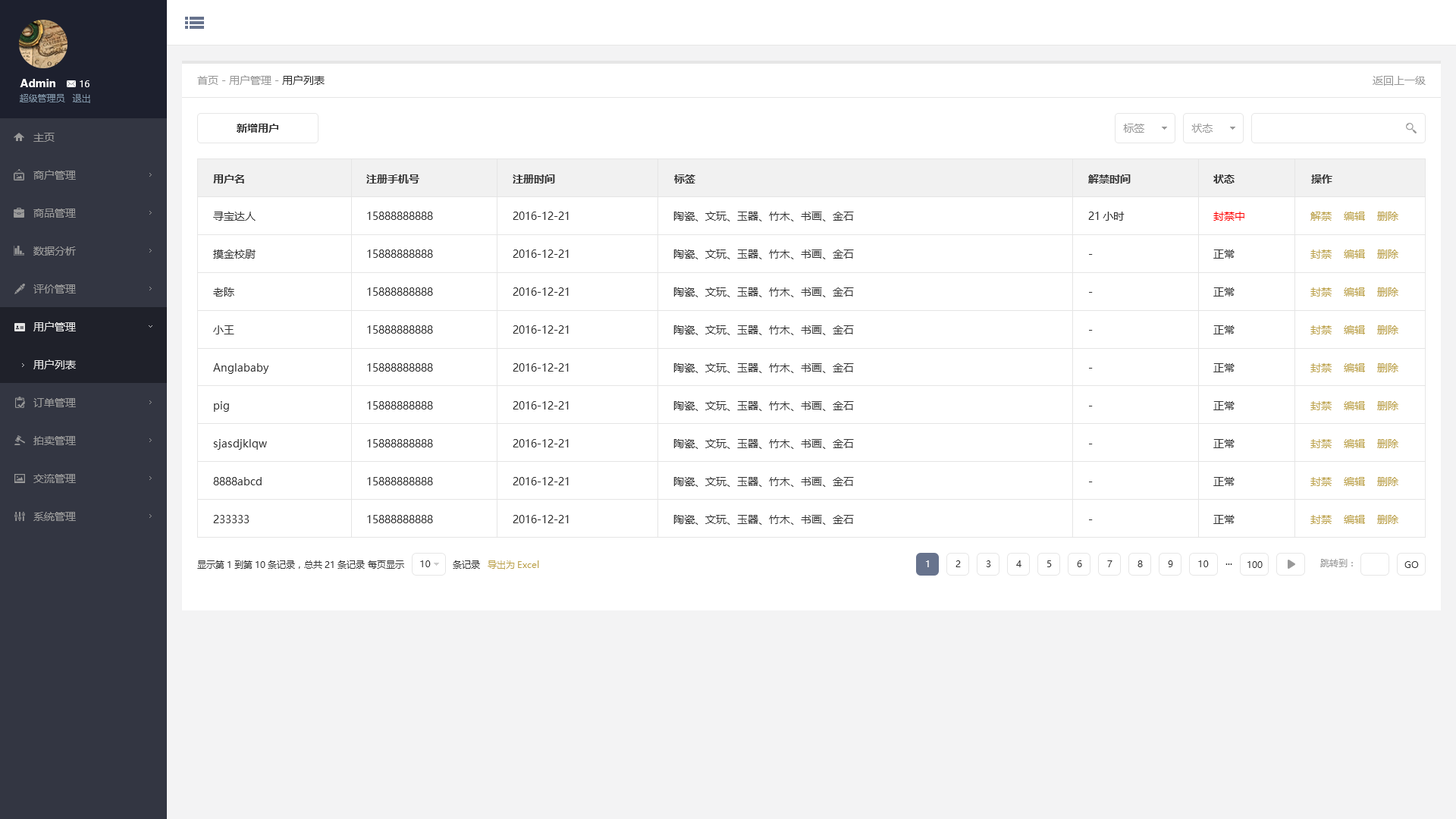
<style>
.page{position:relative;width:1456px;height:819px;background:#ffffff}
.page>*{position:absolute;margin:0}
.t1{font:10.6px "MicrosoftYaHei";color:#999999}
.t2{font:10.6px "MicrosoftYaHei";color:#333333}
.t3{font:10.6px "MicrosoftYaHei-Bold";color:#ffffff}
.t4{font:9.1px "MicrosoftYaHei";color:#ffffff}
.t5{font:9.1px "MicrosoftYaHei";color:#8095a8}
.t6{font:10.6px "MicrosoftYaHei-Bold";color:#333333}
.t7{font:10.6px/37.9px "MicrosoftYaHei";color:#999999}
.t8{font:10.6px/37.9px "MicrosoftYaHei";color:#e6e6e6}
.t9{font:10.6px/37.9px "MicrosoftYaHei";color:#333333}
.t10{font:10.6px/37.9px "MicrosoftYaHei";color:#ff0000}
.t11{font:10.6px/37.9px "MicrosoftYaHei";color:#bda34a}
.t12{font:10.6px "MicrosoftYaHei";color:#e6e6e6}
.t13{font:9.1px "MicrosoftYaHei";color:#333333}
.t14{font:9.1px "MicrosoftYaHei";color:#bda34a}
.t15{font:9.1px "MicrosoftYaHei";color:#999999}
</style>
<div class="page">
<p class="t1" style="left:197px;top:75px;width:128px;height:10px">首页 - 用户管理 - <span class="t2">用户列表</span></p>
<p class="t1" style="left:1373px;top:76px;width:53px;height:10px">返回上一级</p>
<p class="t3" style="left:20px;top:79px;width:35px;height:8px">Admin</p>
<p class="t4" style="left:80px;top:80px;width:9px;height:7px">16</p>
<p class="t5" style="left:20px;top:94px;width:45px;height:8px">超级管理员</p>
<p class="t5" style="left:72px;top:94px;width:18px;height:9px">退出</p>
<p class="t6" style="left:237px;top:124px;width:41px;height:9px">新增用户</p>
<p class="t1" style="left:1123px;top:124px;width:21px;height:9px">标签</p>
<p class="t1" style="left:1191px;top:124px;width:22px;height:9px">状态</p>
<p class="t7" style="left:33px;top:133px;width:43px;height:388px">主页<br>商户管理<br>商品管理<br>数据分析<br>评价管理<br><span class="t8">用户管理<br></span><br>订单管理<br>拍卖管理<br>交流管理<br>系统管理</p>
<p class="t6" style="left:213px;top:174px;width:31px;height:10px">用户名</p>
<p class="t6" style="left:366px;top:174px;width:53px;height:10px">注册手机号</p>
<p class="t6" style="left:513px;top:174px;width:42px;height:10px">注册时间</p>
<p class="t6" style="left:674px;top:174px;width:21px;height:10px">标签</p>
<p class="t6" style="left:1088px;top:174px;width:43px;height:10px">解禁时间</p>
<p class="t6" style="left:1213px;top:174px;width:22px;height:10px">状态</p>
<p class="t6" style="left:1311px;top:174px;width:21px;height:10px">操作</p>
<p class="t9" style="left:213px;top:212px;width:56px;height:311px">寻宝达人<br>摸金校尉<br>老陈<br>小王<br>Anglababy<br>pig<br>sjasdjklqw<br>8888abcd<br>233333</p>
<p class="t9" style="left:367px;top:212px;width:66px;height:311px">15888888888<br>15888888888<br>15888888888<br>15888888888<br>15888888888<br>15888888888<br>15888888888<br>15888888888<br>15888888888</p>
<p class="t9" style="left:513px;top:212px;width:56px;height:311px">2016-12-21<br>2016-12-21<br>2016-12-21<br>2016-12-21<br>2016-12-21<br>2016-12-21<br>2016-12-21<br>2016-12-21<br>2016-12-21</p>
<p class="t9" style="left:673px;top:212px;width:181px;height:313px">陶瓷、文玩、玉器、竹木、书画、金石 <br>陶瓷、文玩、玉器、竹木、书画、金石 <br>陶瓷、文玩、玉器、竹木、书画、金石 <br>陶瓷、文玩、玉器、竹木、书画、金石 <br>陶瓷、文玩、玉器、竹木、书画、金石 <br>陶瓷、文玩、玉器、竹木、书画、金石 <br>陶瓷、文玩、玉器、竹木、书画、金石 <br>陶瓷、文玩、玉器、竹木、书画、金石 <br>陶瓷、文玩、玉器、竹木、书画、金石</p>
<p class="t9" style="left:1088px;top:212px;width:37px;height:308px">21小时<br>-<br>-<br>-<br>-<br>-<br>-<br>-<br>-</p>
<p class="t9" style="left:1213px;top:212px;width:31px;height:312px"><span class="t10">封禁中<br></span>正常<br>正常<br>正常<br>正常<br>正常<br>正常<br>正常<br>正常</p>
<p class="t11" style="left:1310px;top:212px;width:88px;height:312px">解禁    编辑    删除<br>封禁    编辑    删除<br>封禁    编辑    删除<br>封禁    编辑    删除<br>封禁    编辑    删除<br>封禁    编辑    删除<br>封禁    编辑    删除<br>封禁    编辑    删除<br>封禁    编辑    删除</p>
<p class="t12" style="left:33px;top:359px;width:43px;height:10px">用户列表</p>
<p class="t13" style="left:197px;top:560px;width:283px;height:9px">显示第1到第10条记录，总共21条记录 每页显示                条记录</p>
<p class="t13" style="left:420px;top:560px;width:11px;height:7px">10</p>
<p class="t14" style="left:488px;top:560px;width:51px;height:10px">导出为Excel</p>
<p class="t4" style="left:926px;top:560px;width:3px;height:7px">1</p>
<p class="t13" style="left:955px;top:560px;width:6px;height:7px">2</p>
<p class="t13" style="left:986px;top:560px;width:5px;height:7px">3</p>
<p class="t13" style="left:1016px;top:560px;width:5px;height:7px">4</p>
<p class="t13" style="left:1047px;top:560px;width:5px;height:7px">5</p>
<p class="t13" style="left:1077px;top:560px;width:5px;height:7px">6</p>
<p class="t13" style="left:1107px;top:560px;width:5px;height:7px">7</p>
<p class="t13" style="left:1137px;top:560px;width:6px;height:7px">8</p>
<p class="t13" style="left:1168px;top:560px;width:5px;height:7px">9</p>
<p class="t13" style="left:1198px;top:560px;width:11px;height:7px">10</p>
<p class="t13" style="left:1225px;top:563px;width:7px;height:2px">...</p>
<p class="t13" style="left:1247px;top:561px;width:16px;height:7px">100</p>
<p class="t15" style="left:1320px;top:559px;width:33px;height:8px">跳转到：</p>
<p class="t13" style="left:1404px;top:561px;width:15px;height:7px">GO</p>
</div>
